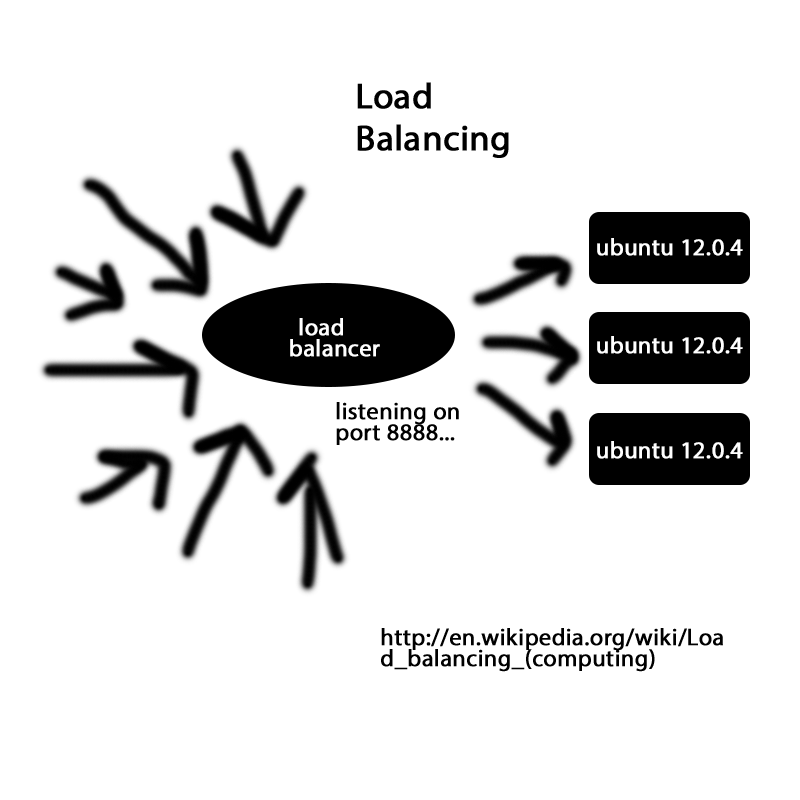
<style>
.page{position:relative;width:800px;height:800px;background:#ffffff}
.page>*{position:absolute;margin:0}
.t1{font:36px/21px "MyriadPro-Regular";color:#000000;font-weight:bold}
.t2{font:24px "MyriadPro-Regular";color:#ffffff;font-weight:bold}
.t3{font:24px/21px "MyriadPro-Regular";color:#000000;font-weight:bold}
</style>
<div class="page">
<p class="t1" style="left:357px;top:82px;width:152px;height:76px">Load<br><br>Balancing</p>
<p class="t2" style="left:597px;top:238px;width:146px;height:18px">ubuntu 12.0.4</p>
<p class="t2" style="left:290px;top:318px;width:90px;height:39px">load balancer</p>
<p class="t2" style="left:597px;top:336px;width:146px;height:18px">ubuntu 12.0.4</p>
<p class="t3" style="left:336px;top:402px;width:123px;height:43px">listening on port 8888...</p>
<p class="t2" style="left:597px;top:441px;width:146px;height:18px">ubuntu 12.0.4</p>
<p class="t3" style="left:381px;top:628px;width:342px;height:44px">http://en.wikipedia.org/wiki/Load_balancing_(computing)</p>
</div>
